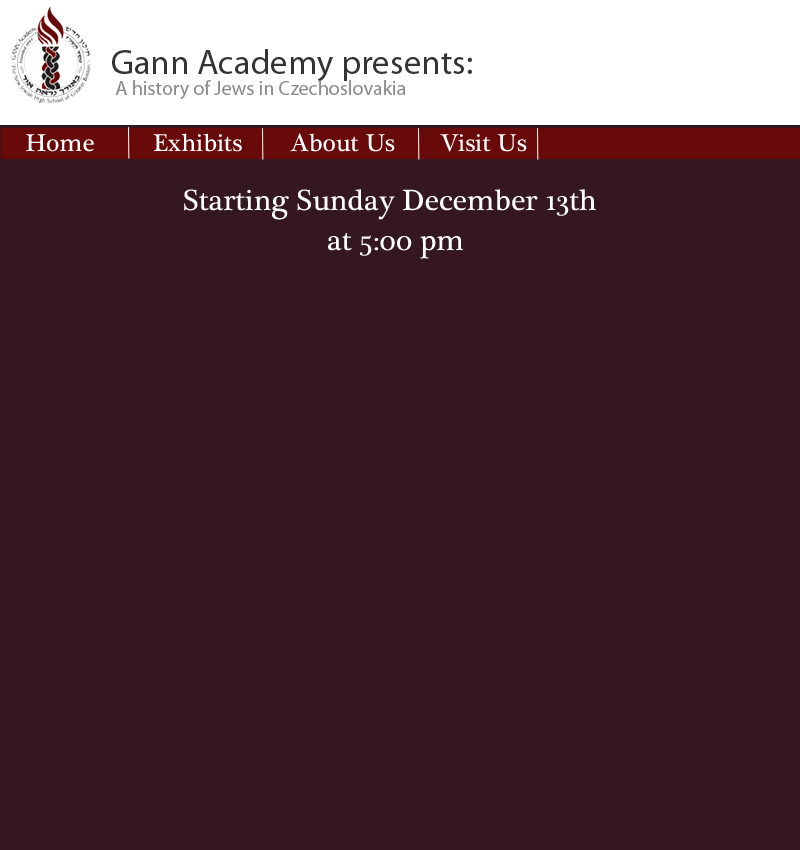
<style>
.page{position:relative;width:800px;height:850px;background:#341721}
.page>*{position:absolute;margin:0}
.t1{font:20px/21px "MyriadPro-Regular";color:#888a8d}
.t2{font:35px/21px "MyriadPro-Regular";color:#343436}
.t3{font:25px "PlantagenetCherokee";color:#ffffff}
.t4{font:30px/40px "PlantagenetCherokee";color:#ffffff}
</style>
<div class="page">
<p class="t1" style="left:112px;top:49px;width:360px;height:50px"><span class="t2">Gann Academy presents:<br></span> A history of Jews in Czechoslovakia</p>
<p class="t3" style="left:26px;top:133px;width:501px;height:19px">Home     Exhibits   About Us    Visit Us</p>
<p class="t4" style="left:184px;top:189px;width:412px;height:70px">Starting Sunday December 13th <br>      at 5:00 pm</p>
</div>
